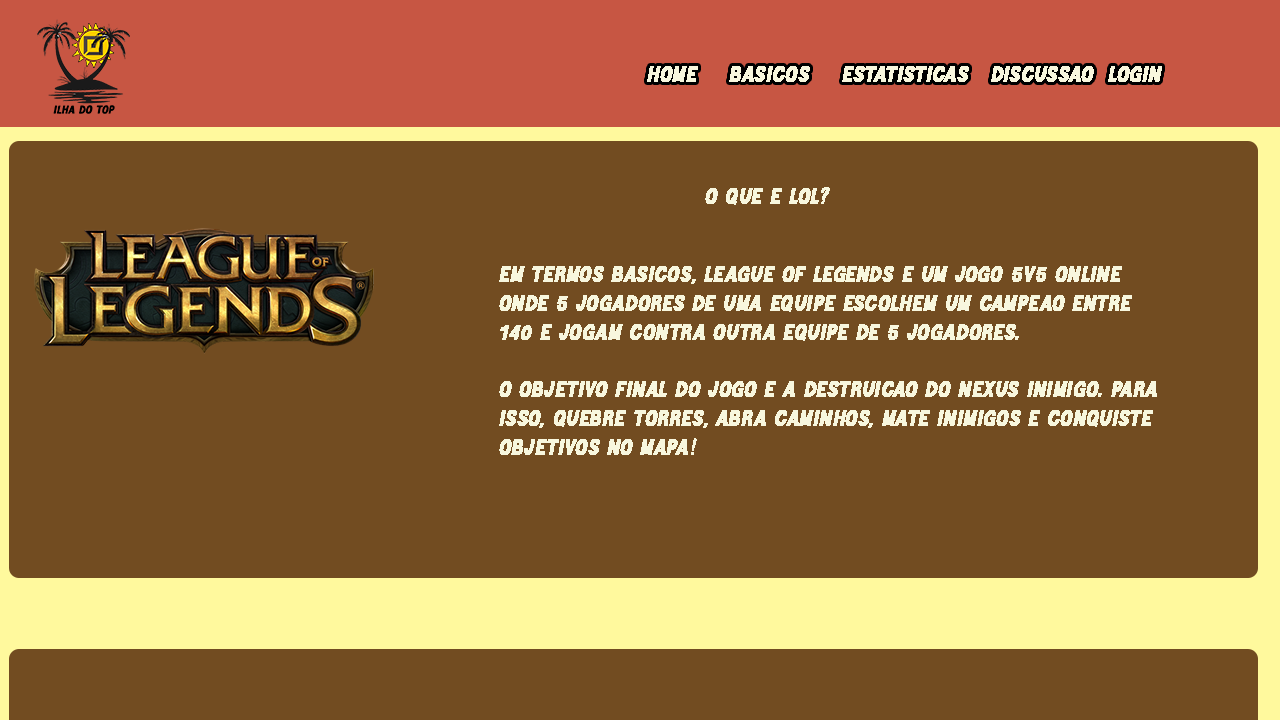
<style>
.page{position:relative;width:1280px;height:720px;background:#724c21}
.page>*{position:absolute;margin:0}
.t1{font:24px "HETIKADemoRegular";color:#f8f7de;font-weight:bold;font-style:italic}
.t2{font:24px "TimesNewRomanPSMT";color:#f8f7de;font-weight:bold;font-style:italic}
</style>
<div class="page">
<p class="t1" style="left:705px;top:187px;width:125px;height:18px">o que é lol?</p>
<p class="t1" style="left:499px;top:266px;width:658px;height:189px">EM termos básicos, league of legends é um jogo 5v5 online <br>onde 5 jogadores de uma equipe escolhem um campeao entre<br>140 e jogam contra outra equipe de 5 jogadores.<br><br>o objetivo final do jogo é a destruiçao do nexus inimigo. para <br>isso, quebre torres, abra caminhos, mate inimigos e conquiste<br>objetivos no mapa<span class="t2">!</span></p>
</div>
